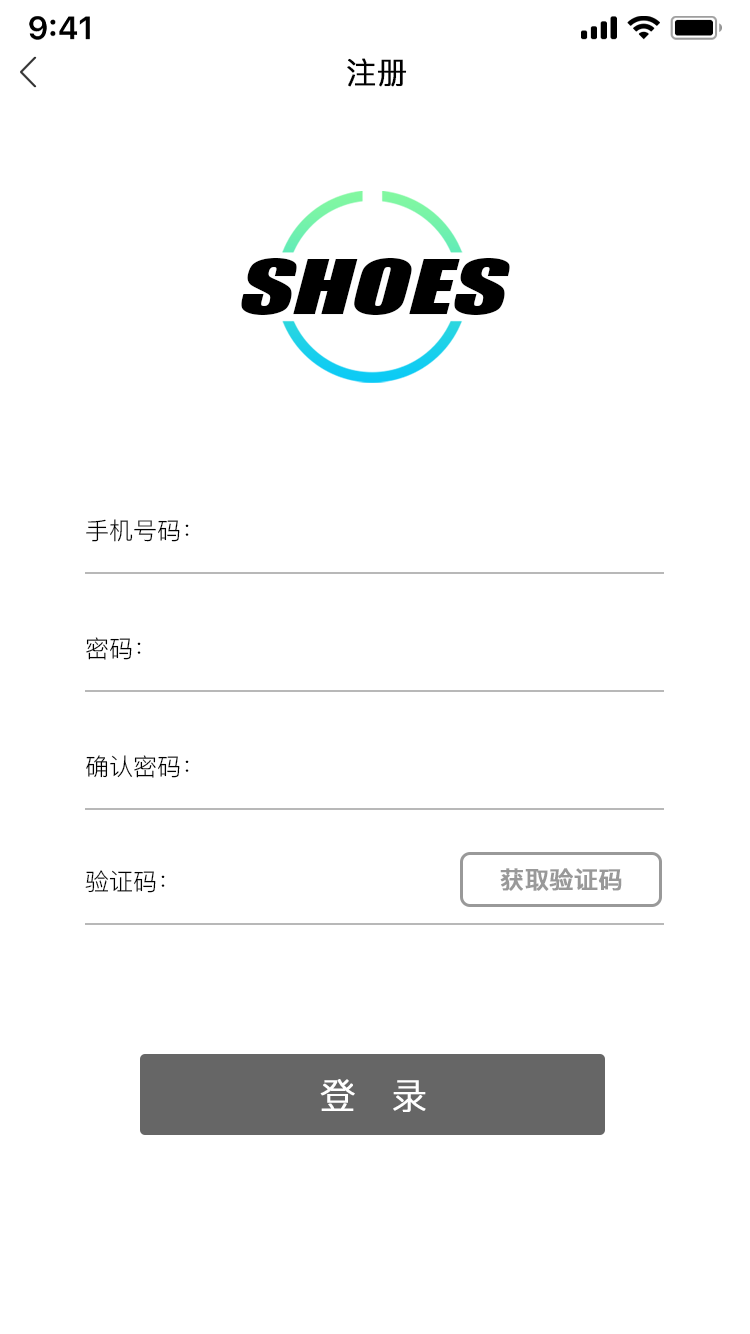
<style>
.page{position:relative;width:750px;height:1334px;background:#ffffff}
.page>*{position:absolute;margin:0}
.t1{font:30px "PingFang-SC-Regular";color:#000000;font-weight:bold}
.t2{font:70.3px "Impact";color:#000000;font-style:italic;scale:1.49 1}
.t3{font:24px "PingFang-SC-Regular";color:#000000}
.t4{font:24px "PingFang-SC-Bold";color:#999999;font-weight:bold}
.t5{font:36px "PingFang-SC-Regular";letter-spacing:1em;color:#ffffff;font-weight:bold}
</style>
<div class="page">
<p class="t1" style="left:347px;top:58px;width:60px;height:29px">注册</p>
<p class="t2" style="left:241px;top:258px;width:269px;height:57px">SHOES</p>
<p class="t3" style="left:86px;top:519px;width:103px;height:23px">手机号码：</p>
<p class="t3" style="left:86px;top:637px;width:55px;height:23px">密码：</p>
<p class="t3" style="left:86px;top:755px;width:103px;height:23px">确认密码：</p>
<p class="t3" style="left:85px;top:870px;width:80px;height:23px">验证码：</p>
<p class="t4" style="left:500px;top:868px;width:122px;height:23px">获取验证码</p>
<p class="t5" style="left:320px;top:1079px;width:106px;height:33px">登录</p>
</div>
